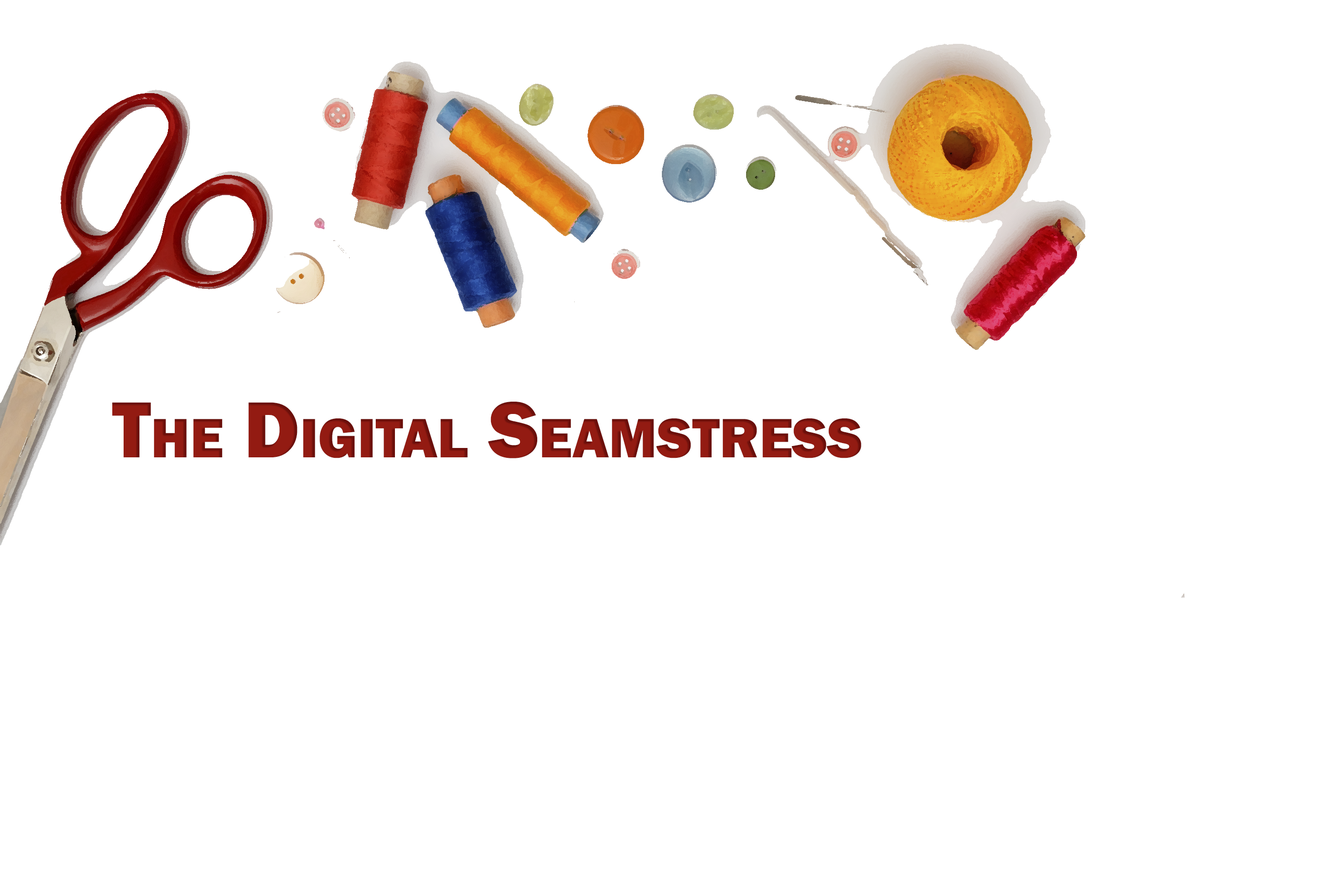
<style>
.page{position:relative;width:1337px;height:892px;background:#ffffff}
.page>*{position:absolute;margin:0}
.t1{font:82.1px "FranklinGothic-Heavy";color:#931b12;font-variant:small-caps}
</style>
<div class="page">
<p class="t1" style="left:112px;top:401px;width:750px;height:57px">The Digital Seamstress</p>
</div>
